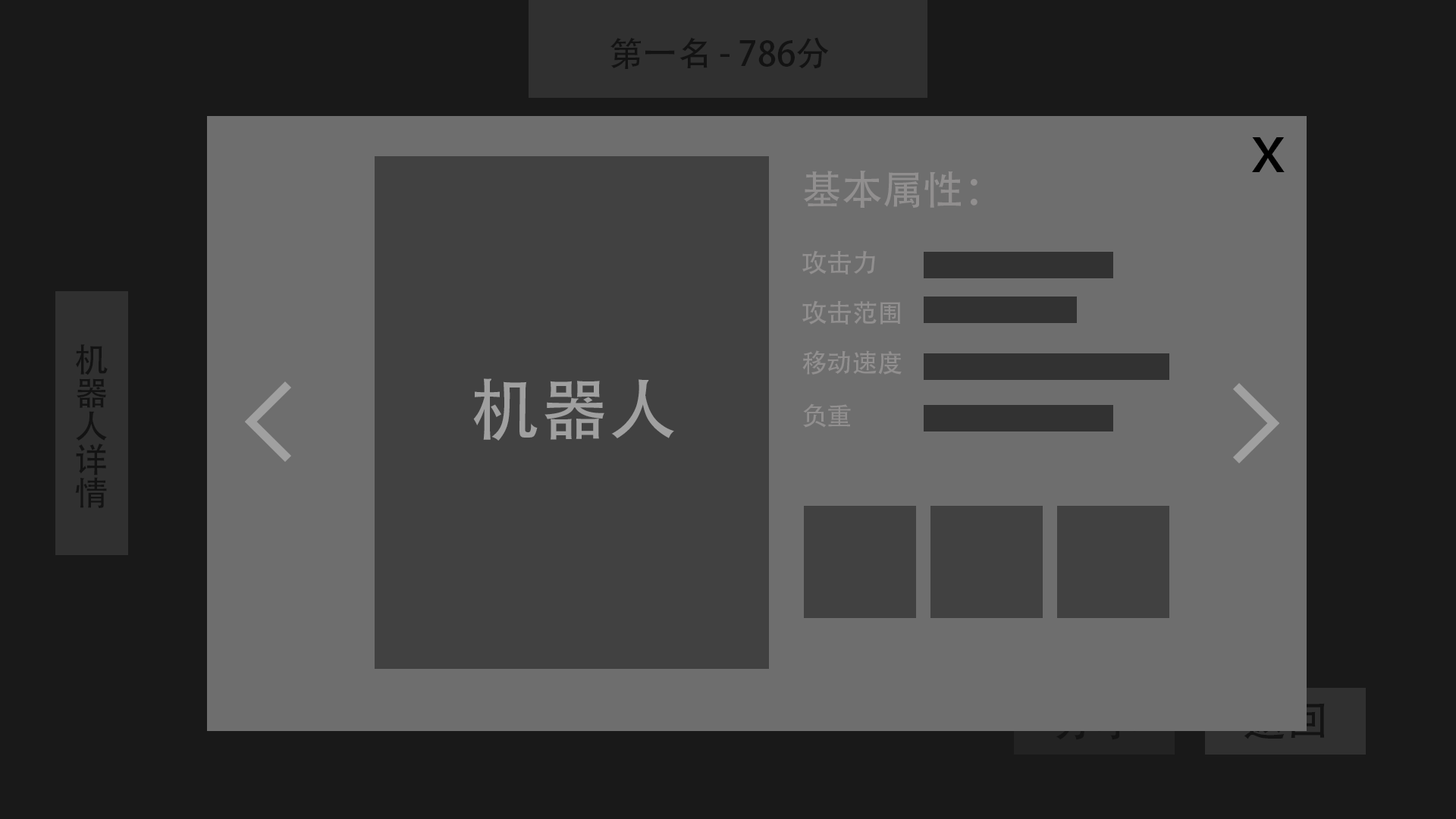
<style>
.page{position:relative;width:1456px;height:819px;background:#191919}
.page>*{position:absolute;margin:0}
.t1{font:34px "AdobeHeitiStd-Regular";color:#000000}
.t2{font:45.7px "AdobeHeitiStd-Regular";color:#000000;scale:1.25 1}
.t3{font:40.5px "AdobeHeitiStd-Regular";color:#918f8f}
.t4{font:25.4px "AdobeHeitiStd-Regular";color:#918f8f}
.t5{font:34px/33.4px "AdobeHeitiStd-Regular";color:#000000}
.t6{font:103.4px "AdobeHeitiStd-Regular";color:#a0a0a0}
.t7{font:68.5px "AdobeHeitiStd-Regular";color:#a0a0a0}
</style>
<div class="page">
<p class="t1" style="left:610px;top:37px;width:219px;height:32px">第一名 - 786分</p>
<p class="t2" style="left:1252px;top:137px;width:33px;height:35px">X</p>
<p class="t3" style="left:803px;top:171px;width:174px;height:37px">基本属性：</p>
<p class="t4" style="left:802px;top:250px;width:73px;height:25px">攻击力</p>
<p class="t4" style="left:802px;top:300px;width:98px;height:25px">攻击范围</p>
<p class="t5" style="left:75px;top:344px;width:33px;height:164px;text-align:center">机<br>器<br>人<br>详<br>情</p>
<p class="t4" style="left:802px;top:350px;width:100px;height:25px">移动速度</p>
<p class="t6" style="left:245px;top:381px;width:46px;height:81px">&lt;</p>
<p class="t7" style="left:473px;top:378px;width:201px;height:63px">机器人</p>
<p class="t6" style="left:1233px;top:383px;width:46px;height:80px;rotate:180deg">&lt;</p>
<p class="t4" style="left:803px;top:403px;width:48px;height:25px">负重</p>
</div>
